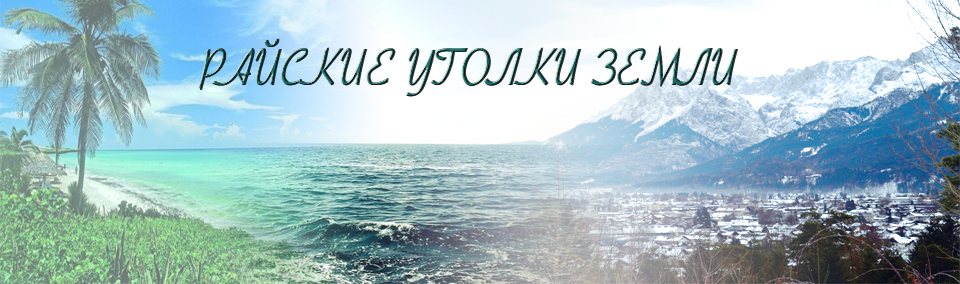
<style>
.page{position:relative;width:960px;height:284px}
.page>*{position:absolute;margin:0}
.t1{font:49.9px "CyrillicRibbon";text-transform:uppercase;font-weight:bold;scale:0.86 1}
</style>
<div class="page">
<p class="t1" style="left:198px;top:38px;width:539px;height:59px">Райские уголки Земли</p>
</div>
